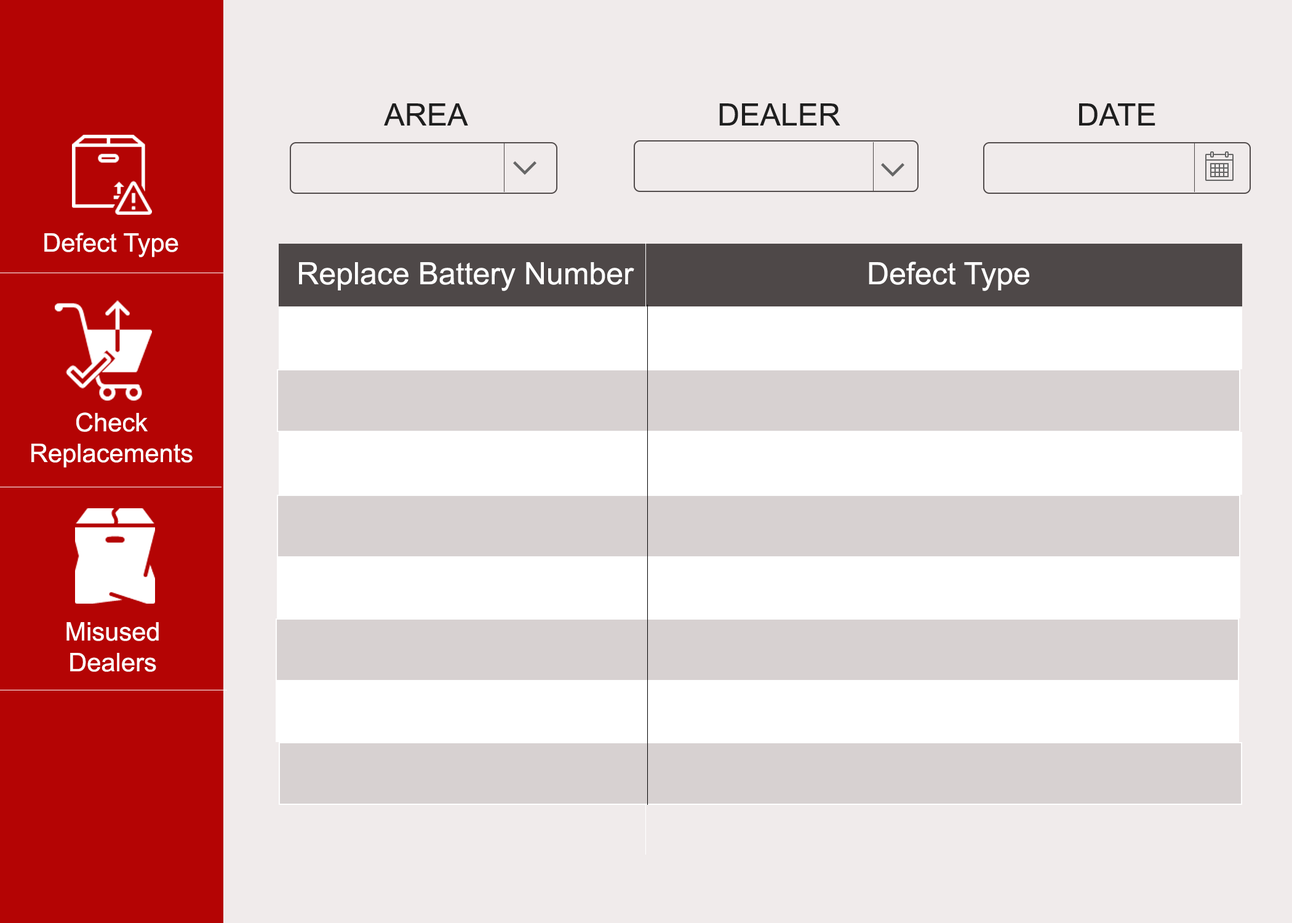
<style>
.page{position:relative;width:1292px;height:923px;background:#f0ebeb}
.page>*{position:absolute;margin:0}
.t1{font:30.8px "ArialMT";color:#1f1f1f}
.t2{font:25.6px "ArialMT";color:#ffffff}
.t3{font:7.4px "ArialMT";color:#ffffff}
</style>
<div class="page">
<p class="t1" style="left:384px;top:103px;width:84px;height:23px">AREA</p>
<p class="t1" style="left:719px;top:103px;width:121px;height:23px">DEALER</p>
<p class="t1" style="left:1079px;top:103px;width:76px;height:23px">DATE</p>
<p class="t2" style="left:44px;top:233px;width:134px;height:24px">Defect Type</p>
<p class="t3" style="left:299px;top:262px;width:335px;height:29px;text-align:center">Replace Battery Number</p>
<p class="t3" style="left:869px;top:261px;width:160px;height:30px;text-align:center">Defect Type</p>
<p class="t2" style="left:31px;top:412px;width:162px;height:56px;text-align:center">Check<br>Replacements</p>
<p class="t2" style="left:66px;top:622px;width:93px;height:50px;text-align:center">Misused<br>Dealers</p>
</div>
